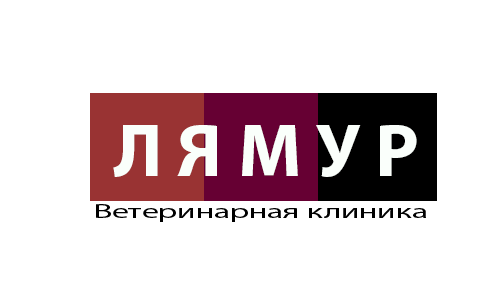
<style>
.page{position:relative;width:500px;height:300px;background:#ffffff}
.page>*{position:absolute;margin:0}
.t1{font:75px "MyriadPro-Bold";color:#fafffb}
.t2{font:20.5px "MyriadPro-Regular";color:#000000;scale:1.63 1}
</style>
<div class="page">
<p class="t1" style="left:113px;top:125px;width:304px;height:52px">Л Я М У Р</p>
<p class="t2" style="left:96px;top:204px;width:330px;height:18px">Ветеринарная клиника</p>
</div>
